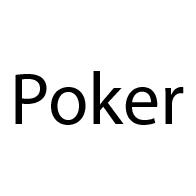
<style>
.page{position:relative;width:196px;height:196px;background:#ffffff}
.page>*{position:absolute;margin:0}
.t1{font:74px "MyriadPro-Regular";color:#000000}
</style>
<div class="page">
<p class="t1" style="left:15px;top:71px;width:169px;height:54px">Poker</p>
</div>
